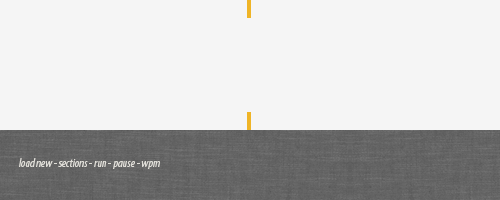
<style>
.page{position:relative;width:500px;height:200px;background:#f5f5f5}
.page>*{position:absolute;margin:0}
.t1{font:12px "MyriadPro-CondIt";color:#e0ded8}
</style>
<div class="page">
<p class="t1" style="left:19px;top:158px;width:141px;height:11px">load new - sections - run - pause - wpm</p>
</div>
